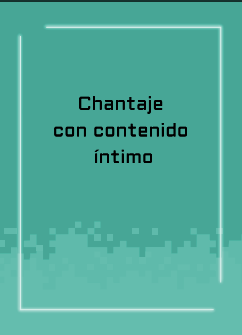
<style>
.page{position:relative;width:242px;height:335px;background:#47a696}
.page>*{position:absolute;margin:0}
.t1{font:18.7px/26.7px "Aldrich-Regular";letter-spacing:0.005em;color:#000000}
</style>
<div class="page">
<p class="t1" style="left:54px;top:96px;width:133px;height:68px;text-align:center">Chantaje <br>con contenido <br>íntimo</p>
</div>
